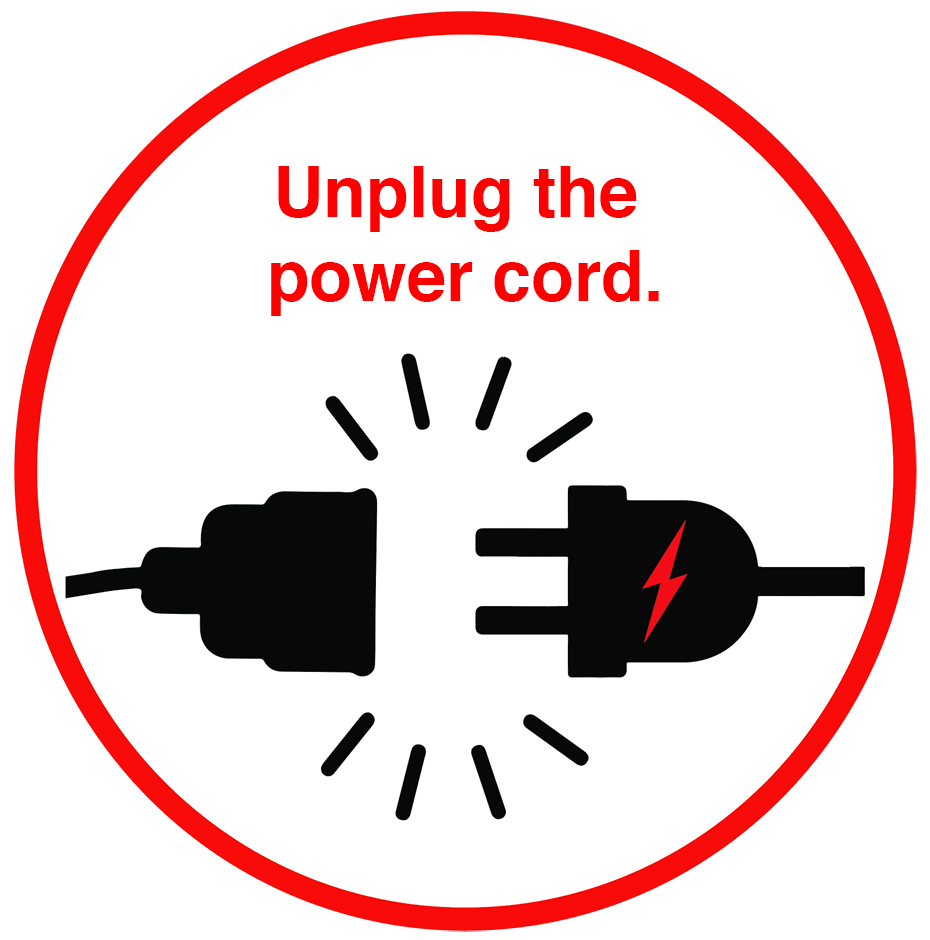
<style>
.page{position:relative;width:930px;height:940px;background:#ffffff}
.page>*{position:absolute;margin:0}
.t1{font:70px "Helvetica-Bold";color:#ff0000}
</style>
<div class="page">
<p class="t1" style="left:271px;top:166px;width:388px;height:150px;text-align:center">Unplug the <br>power cord.</p>
</div>
